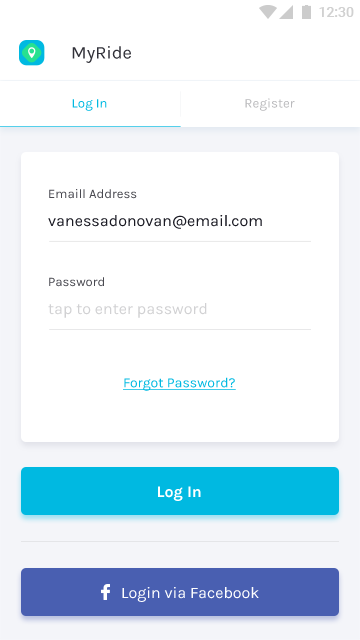
<style>
.page{position:relative;width:360px;height:640px;background:#ffffff}
.page>*{position:absolute;margin:0}
.t1{font:18px "Karla-Regular";color:#1b1b24}
.t2{font:13.3px "Karla-Regular";color:#00b9e1}
.t3{font:13.3px "Karla-Regular";color:#bababd}
.t4{font:13px "Karla-Regular";color:#494950}
.t5{font:16px "Karla-Regular";color:#1b1b24}
.t6{font:16px "Karla-Regular";color:#d1d1d3}
.t7{font:14px "Karla-Regular";color:#00b9e1;text-decoration:underline}
.t8{font:16px "Karla-Bold";color:#ffffff}
.t9{font:16px "Karla-Regular";color:#ffffff}
</style>
<div class="page">
<p class="t1" style="left:72px;top:46px;width:59px;height:17px;opacity:0.9">MyRide</p>
<p class="t2" style="left:72px;top:99px;width:35px;height:12px">Log In</p>
<p class="t3" style="left:245px;top:98px;width:50px;height:13px">Register</p>
<p class="t4" style="left:49px;top:189px;width:88px;height:10px">Emaill Address</p>
<p class="t5" style="left:48px;top:215px;width:214px;height:14px">vanessadonovan@email.com</p>
<p class="t4" style="left:49px;top:277px;width:55px;height:10px">Password</p>
<p class="t6" style="left:48px;top:303px;width:159px;height:15px">tap to enter password</p>
<p class="t7" style="left:123px;top:377px;width:113px;height:14px">Forgot Password?</p>
<p class="t8" style="left:158px;top:486px;width:43px;height:15px">Log In</p>
<p class="t9" style="left:122px;top:587px;width:137px;height:15px">Login via Facebook</p>
</div>
